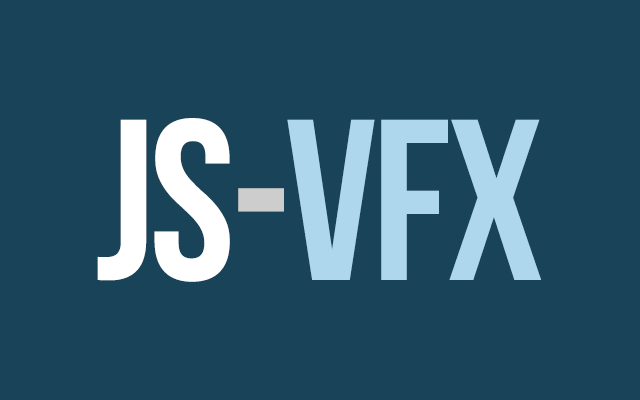
<style>
.page{position:relative;width:640px;height:400px;background:#184358}
.page>*{position:absolute;margin:0}
.t1{font:228.3px "BebasNeue";letter-spacing:-0.02em;color:#aed7ed}
.t2{font:228.3px "BebasNeue";letter-spacing:-0.02em;color:#ffffff}
.t3{font:228.3px "BebasNeue";letter-spacing:-0.02em;color:#cdcdcd}
</style>
<div class="page">
<p class="t1" style="left:97px;top:118px;width:444px;height:164px"><span class="t2">JS</span><span class="t3">-</span>VFX</p>
</div>
